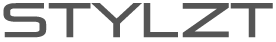
<style>
.page{position:relative;width:276px;height:42px;background:#ffffff}
.page>*{position:absolute;margin:0}
.t1{font:48.2px "Pirulen";color:#555555}
</style>
<div class="page">
<p class="t1" style="left:3px;top:3px;width:270px;height:35px">STYLZT</p>
</div>
